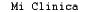
<style>
.page{position:relative;width:92px;height:12px;background:#ffffff}
.page>*{position:absolute;margin:0}
.t1{font:12px "Courier";color:#000000}
</style>
<div class="page">
<p class="t1" style="left:11px;top:2px;width:67px;height:8px">Mi Clinica</p>
</div>
